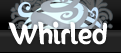
<style>
.page{position:relative;width:121px;height:53px}
.page>*{position:absolute;margin:0}
.t1{font:24px "SunnySide";color:#ffffff}
</style>
<div class="page">
<p class="t1" style="left:8px;top:21px;width:99px;height:24px">Whirled</p>
</div>
